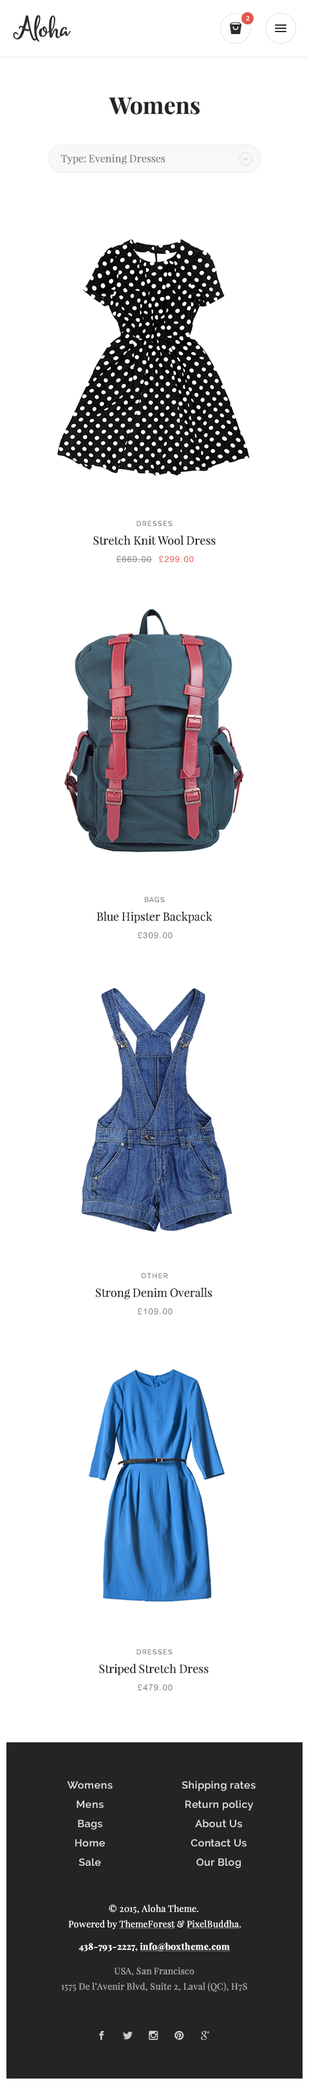
<style>
.page{position:relative;width:309px;height:2085px;background:#ffffff}
.page>*{position:absolute;margin:0}
.t1{font:32.1px "Michael";color:#2d2d2d}
.t2{font:6.4px "Montserrat-Regular";letter-spacing:0.02em;color:#ffffff}
.t3{font:23.1px "PlayfairDisplay-Bold";color:#242424}
.t4{font:10.3px "PlayfairDisplay-Regular";color:#7e7e7e}
.t5{font:7.1px "Raleway-SemiBold";letter-spacing:0.1em;color:#7e7e7e}
.t6{font:11.6px "PlayfairDisplay-Regular";color:#242424}
.t7{font:8.4px "Helvetica";letter-spacing:0.1em;color:#7e7e7e}
.t8{font:8.4px "Helvetica";letter-spacing:0.1em;color:#e2574c}
.t9{font:7.1px "Raleway-SemiBold";letter-spacing:0.1em;color:#7e7e7e;text-transform:uppercase}
.t10{font:10.3px/19.3px "Raleway-SemiBold";letter-spacing:0.02em;color:#dfdfdf}
.t11{font:9px/15.4px "PlayfairDisplay-Regular";letter-spacing:0.02em;color:#ffffff}
.t12{font:9px/15.4px "PlayfairDisplay-Regular";letter-spacing:0.02em;color:#ffffff;text-decoration:underline}
.t13{font:9px "PlayfairDisplay-Bold";letter-spacing:0.02em;color:#ffffff;text-decoration:underline}
.t14{font:9px "PlayfairDisplay-Bold";letter-spacing:0.02em;color:#ffffff}
.t15{font:9px/15.4px "PlayfairDisplay-Regular";letter-spacing:0.02em;color:#aaaaaa}
</style>
<div class="page">
<p class="t1" style="left:13px;top:15px;width:58px;height:27px">Aloha</p>
<p class="t2" style="left:246px;top:15px;width:3px;height:6px">2</p>
<p class="t3" style="left:109px;top:97px;width:91px;height:17px">Womens</p>
<p class="t4" style="left:61px;top:154px;width:104px;height:11px">Type: Evening Dresses</p>
<p class="t5" style="left:136px;top:521px;width:36px;height:5px">DRESSES</p>
<p class="t6" style="left:93px;top:536px;width:122px;height:9px">Stretch Knit Wool Dress</p>
<p class="t7" style="left:116px;top:555px;width:36px;height:7px">£669.00</p>
<p class="t8" style="left:159px;top:555px;width:35px;height:7px">£299.00</p>
<p class="t5" style="left:144px;top:897px;width:21px;height:6px">BAGS</p>
<p class="t6" style="left:96px;top:912px;width:116px;height:11px">Blue Hipster Backpack</p>
<p class="t7" style="left:138px;top:932px;width:34px;height:7px">£309.00</p>
<p class="t9" style="left:141px;top:1273px;width:27px;height:6px">OTHER</p>
<p class="t6" style="left:95px;top:1288px;width:117px;height:11px">Strong Denim Overalls</p>
<p class="t7" style="left:138px;top:1308px;width:34px;height:7px">£109.00</p>
<p class="t9" style="left:136px;top:1649px;width:36px;height:6px">DRESSES</p>
<p class="t6" style="left:99px;top:1664px;width:109px;height:11px">Striped Stretch Dress</p>
<p class="t7" style="left:138px;top:1684px;width:34px;height:7px">£479.00</p>
<p class="t10" style="left:67px;top:1781px;width:46px;height:85px;text-align:center">Womens<br>Mens<br>Bags<br>Home<br>Sale</p>
<p class="t10" style="left:181px;top:1781px;width:74px;height:87px;text-align:center">Shipping rates<br>Return policy<br>About Us<br>Contact Us<br>Our Blog</p>
<p class="t11" style="left:68px;top:1904px;width:172px;height:25px;text-align:center">© 2015, Aloha Theme. <br>Powered by <span class="t12">ThemeForest</span> &amp; <span class="t12">PixelBuddha</span>.</p>
<p class="t13" style="left:78px;top:1942px;width:152px;height:9px"><span class="t14">438-793-2227, </span>info@boxtheme.com</p>
<p class="t15" style="left:61px;top:1967px;width:186px;height:25px;text-align:center">USA, San Francisco<br>1575 De l’Avenir Blvd, Suite 2, Laval (QC), H7S</p>
</div>
